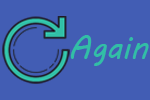
<style>
.page{position:relative;width:150px;height:100px;background:#425db4}
.page>*{position:absolute;margin:0}
.t1{font:32.5px "MVBoli";color:#32bea6}
</style>
<div class="page">
<p class="t1" style="left:70px;top:35px;width:79px;height:31px">Again</p>
</div>
